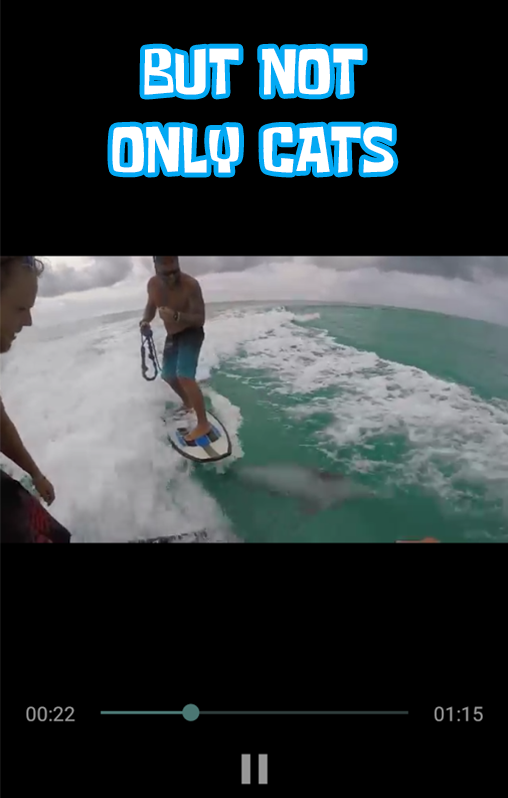
<style>
.page{position:relative;width:508px;height:798px;background:#000000}
.page>*{position:absolute;margin:0}
.t1{font:65px "SomeTimeLater";color:#ffffff}
</style>
<div class="page">
<p class="t1" style="left:112px;top:48px;width:282px;height:125px;text-align:center">BUT NOT<br>ONLY CATS</p>
</div>
